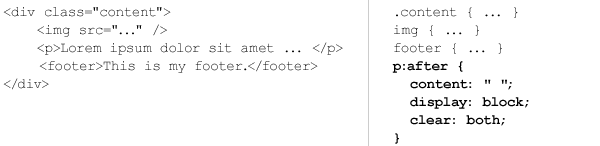
<style>
.page{position:relative;width:600px;height:146px;background:#ffffff}
.page>*{position:absolute;margin:0}
.t1{font:14px/18px "CourierNewPSMT";color:#000000}
.t2{font:14px/18px "CourierNewPS-BoldMT";color:#000000}
</style>
<div class="page">
<p class="t1" style="left:3px;top:7px;width:340px;height:83px">&lt;div class="content"&gt;<br>    &lt;img src="..." /&gt;<br>    &lt;p&gt;Lorem ipsum dolor sit amet ... &lt;/p&gt;<br> &lt;footer&gt;This is my footer.&lt;/footer&gt;<br>&lt;/div&gt;</p>
<p class="t2" style="left:392px;top:7px;width:137px;height:137px"><span class="t1">.content { ... }<br>img { ... }<br>footer { ... }<br></span>p:after {<br>  content: " ";<br>  display: block;<br>  clear: both;<br>}</p>
</div>
